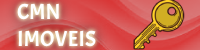
<style>
.page{position:relative;width:200px;height:50px}
.page>*{position:absolute;margin:0}
.t1{font:21.9px "Acme-Regular";color:#ffffff}
</style>
<div class="page">
<p class="t1" style="left:17px;top:3px;width:79px;height:44px">CMN <br>IMOVEIS</p>
</div>
